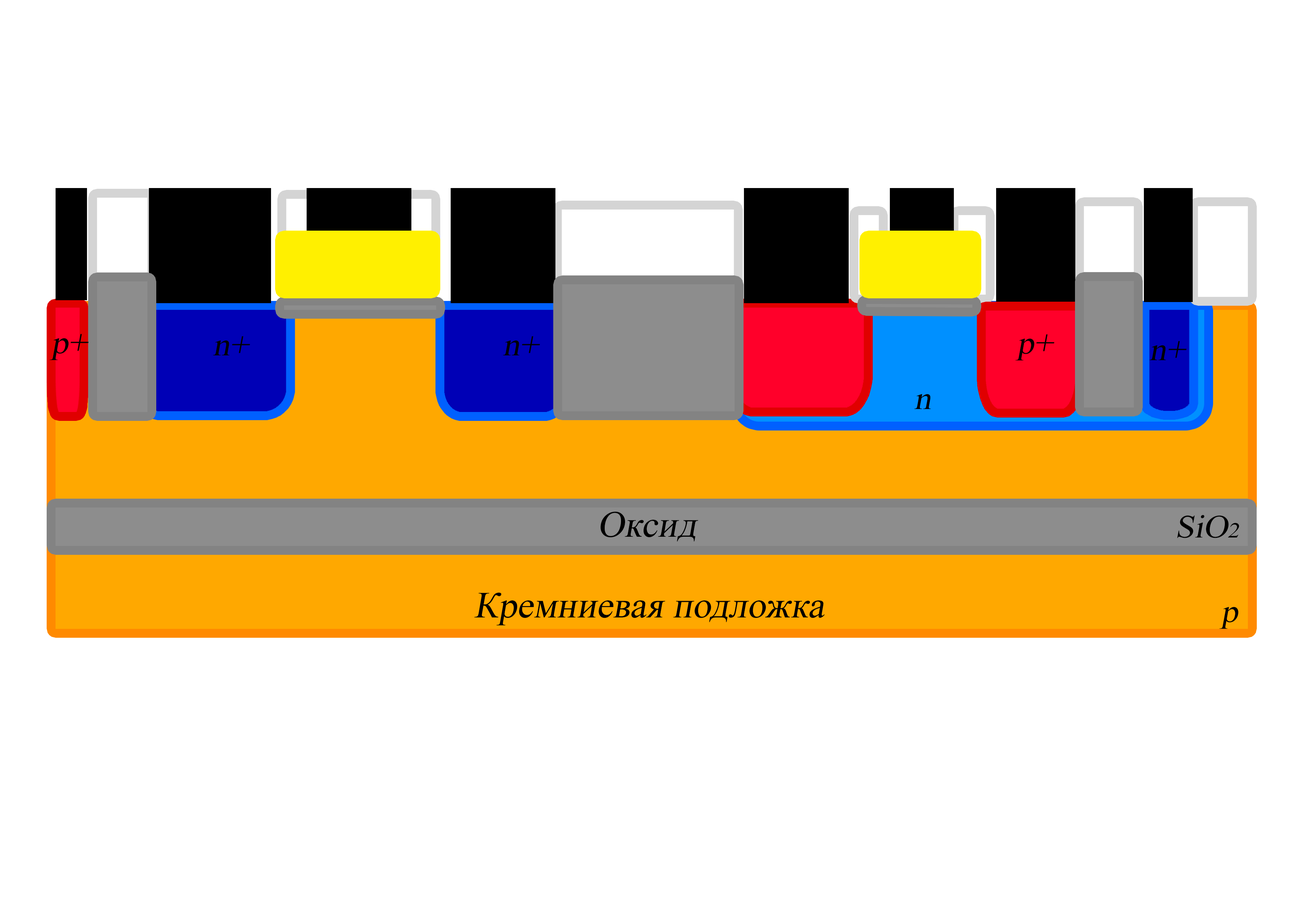
<style>
.page{position:relative;width:1299px;height:918px;background:#ffffff}
.page>*{position:absolute;margin:0}
.t1{font:32.3px "TimesNewRomanPSMT";color:#000000;font-style:italic;scale:1.05 1}
.t2{font:37px "TimesNewRomanPSMT";color:#000000;font-style:italic}
.t3{font:21.5px "TimesNewRomanPSMT";color:#000000;font-style:italic;scale:1.05 1}
</style>
<div class="page">
<p class="t1" style="left:50px;top:334px;width:39px;height:26px">p+</p>
<p class="t1" style="left:213px;top:336px;width:37px;height:19px">n+</p>
<p class="t1" style="left:503px;top:336px;width:37px;height:19px">n+</p>
<p class="t1" style="left:1015px;top:334px;width:39px;height:27px">p+</p>
<p class="t1" style="left:1149px;top:341px;width:38px;height:19px">n+</p>
<p class="t1" style="left:914px;top:394px;width:17px;height:15px">n</p>
<p class="t2" style="left:600px;top:512px;width:98px;height:30px">Оксид</p>
<p class="t1" style="left:1177px;top:515px;width:62px;height:23px">SiO<span class="t3">2</span></p>
<p class="t2" style="left:474px;top:593px;width:350px;height:33px">Кремниевая подложка</p>
<p class="t1" style="left:1219px;top:607px;width:19px;height:22px">p</p>
</div>
